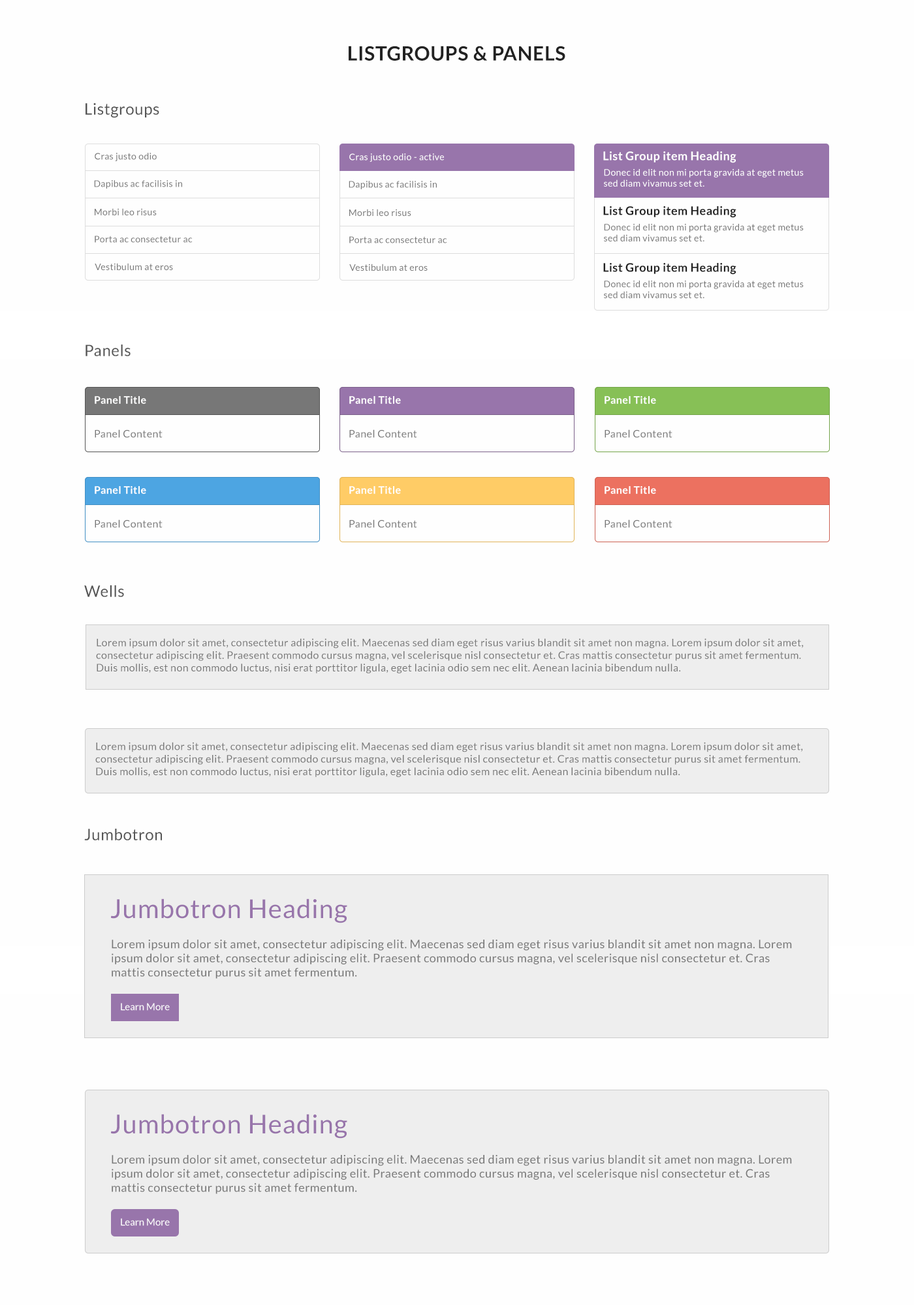
<style>
.page{position:relative;width:914px;height:1305px;background:#fefefe}
.page>*{position:absolute;margin:0}
.t1{font:19.6px "Lato-Bold";letter-spacing:0.025em;color:#222222}
.t2{font:15.7px "Lato-Regular";letter-spacing:0.025em;color:#555555}
.t3{font:9.1px "Lato-Regular";letter-spacing:0.025em;color:#777777}
.t4{font:9.1px "Lato-Regular";letter-spacing:0.025em;color:#ffffff}
.t5{font:11.7px "Lato-Bold";letter-spacing:0.025em;color:#ffffff}
.t6{font:11.7px "Lato-Bold";letter-spacing:0.025em;color:#222222}
.t7{font:10.4px "Lato-Bold";letter-spacing:0.025em;color:#ffffff}
.t8{font:10.4px "Lato-Regular";letter-spacing:0.025em;color:#777777}
.t9{font:26.1px "Lato-Regular";letter-spacing:0.025em;color:#9875ab}
.t10{font:11.7px "Lato-Regular";letter-spacing:0.025em;color:#777777}
.t11{font:9.8px "Lato-Regular";color:#ffffff}
</style>
<div class="page">
<p class="t1" style="left:348px;top:46px;width:217px;height:15px">LISTGROUPS &amp; PANELS</p>
<p class="t2" style="left:85px;top:103px;width:74px;height:15px">Listgroups</p>
<p class="t3" style="left:95px;top:153px;width:62px;height:8px">Cras justo odio</p>
<p class="t4" style="left:349px;top:153px;width:95px;height:9px">Cras justo odio - active</p>
<p class="t5" style="left:603px;top:151px;width:133px;height:12px">List Group item Heading</p>
<p class="t4" style="left:604px;top:169px;width:199px;height:18px">Donec id elit non mi porta gravida at eget metus sed diam vivamus set et.</p>
<p class="t3" style="left:94px;top:180px;width:88px;height:9px">Dapibus ac facilisis in</p>
<p class="t3" style="left:348px;top:181px;width:89px;height:8px">Dapibus ac facilisis in</p>
<p class="t3" style="left:95px;top:208px;width:62px;height:7px">Morbi leo risus</p>
<p class="t3" style="left:349px;top:209px;width:62px;height:7px">Morbi leo risus</p>
<p class="t6" style="left:603px;top:206px;width:133px;height:12px">List Group item Heading</p>
<p class="t3" style="left:604px;top:224px;width:199px;height:17px">Donec id elit non mi porta gravida at eget metus sed diam vivamus set et.</p>
<p class="t3" style="left:95px;top:236px;width:98px;height:7px">Porta ac consectetur ac</p>
<p class="t3" style="left:349px;top:236px;width:98px;height:7px">Porta ac consectetur ac</p>
<p class="t3" style="left:95px;top:263px;width:78px;height:7px">Vestibulum at eros</p>
<p class="t3" style="left:349px;top:264px;width:78px;height:7px">Vestibulum at eros</p>
<p class="t6" style="left:603px;top:263px;width:133px;height:12px">List Group item Heading</p>
<p class="t3" style="left:604px;top:281px;width:199px;height:17px">Donec id elit non mi porta gravida at eget metus sed diam vivamus set et.</p>
<p class="t2" style="left:85px;top:345px;width:46px;height:11px">Panels</p>
<p class="t7" style="left:95px;top:396px;width:51px;height:8px">Panel Title</p>
<p class="t7" style="left:349px;top:396px;width:52px;height:8px">Panel Title</p>
<p class="t7" style="left:604px;top:396px;width:52px;height:8px">Panel Title</p>
<p class="t8" style="left:95px;top:429px;width:67px;height:9px">Panel Content</p>
<p class="t8" style="left:349px;top:429px;width:68px;height:9px">Panel Content</p>
<p class="t8" style="left:604px;top:429px;width:68px;height:9px">Panel Content</p>
<p class="t7" style="left:95px;top:486px;width:51px;height:8px">Panel Title</p>
<p class="t7" style="left:349px;top:486px;width:52px;height:8px">Panel Title</p>
<p class="t7" style="left:604px;top:486px;width:52px;height:8px">Panel Title</p>
<p class="t8" style="left:95px;top:519px;width:67px;height:9px">Panel Content</p>
<p class="t8" style="left:349px;top:519px;width:68px;height:9px">Panel Content</p>
<p class="t8" style="left:604px;top:519px;width:68px;height:9px">Panel Content</p>
<p class="t2" style="left:84px;top:585px;width:40px;height:12px">Wells</p>
<p class="t8" style="left:96px;top:638px;width:707px;height:35px">Lorem ipsum dolor sit amet, consectetur adipiscing elit. Maecenas sed diam eget risus varius blandit sit amet non magna. Lorem ipsum dolor sit amet, consectetur adipiscing elit. Praesent commodo cursus magna, vel scelerisque nisl consectetur et. Cras mattis consectetur purus sit amet fermentum. Duis mollis, est non commodo luctus, nisi erat porttitor ligula, eget lacinia odio sem nec elit. Aenean lacinia bibendum nulla.</p>
<p class="t8" style="left:95px;top:742px;width:708px;height:35px">Lorem ipsum dolor sit amet, consectetur adipiscing elit. Maecenas sed diam eget risus varius blandit sit amet non magna. Lorem ipsum dolor sit amet, consectetur adipiscing elit. Praesent commodo cursus magna, vel scelerisque nisl consectetur et. Cras mattis consectetur purus sit amet fermentum. Duis mollis, est non commodo luctus, nisi erat porttitor ligula, eget lacinia odio sem nec elit. Aenean lacinia bibendum nulla.</p>
<p class="t2" style="left:84px;top:829px;width:78px;height:12px">Jumbotron</p>
<p class="t9" style="left:111px;top:899px;width:236px;height:24px">Jumbotron Heading</p>
<p class="t10" style="left:112px;top:940px;width:680px;height:39px">Lorem ipsum dolor sit amet, consectetur adipiscing elit. Maecenas sed diam eget risus varius blandit sit amet non magna. Lorem ipsum dolor sit amet, consectetur adipiscing elit. Praesent commodo cursus magna, vel scelerisque nisl consectetur et. Cras mattis consectetur purus sit amet fermentum.</p>
<p class="t11" style="left:121px;top:1003px;width:49px;height:8px">Learn More</p>
<p class="t9" style="left:111px;top:1114px;width:236px;height:25px">Jumbotron Heading</p>
<p class="t10" style="left:112px;top:1155px;width:680px;height:39px">Lorem ipsum dolor sit amet, consectetur adipiscing elit. Maecenas sed diam eget risus varius blandit sit amet non magna. Lorem ipsum dolor sit amet, consectetur adipiscing elit. Praesent commodo cursus magna, vel scelerisque nisl consectetur et. Cras mattis consectetur purus sit amet fermentum.</p>
<p class="t11" style="left:121px;top:1218px;width:49px;height:8px">Learn More</p>
</div>
